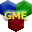
<style>
.page{position:relative;width:32px;height:32px;background:#ffffff}
.page>*{position:absolute;margin:0}
.t1{font:10px "Tahoma-Bold";color:#fcde39}
</style>
<div class="page">
<p class="t1" style="left:4px;top:11px;width:23px;height:9px">GME</p>
</div>
